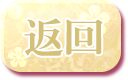
<style>
.page{position:relative;width:128px;height:80px}
.page>*{position:absolute;margin:0}
.t1{font:40px "FZXBSK--GBK1-0";letter-spacing:-0.03em;color:#d4c076;font-weight:bold}
</style>
<div class="page">
<p class="t1" style="left:24px;top:18px;width:79px;height:38px">返回</p>
</div>
